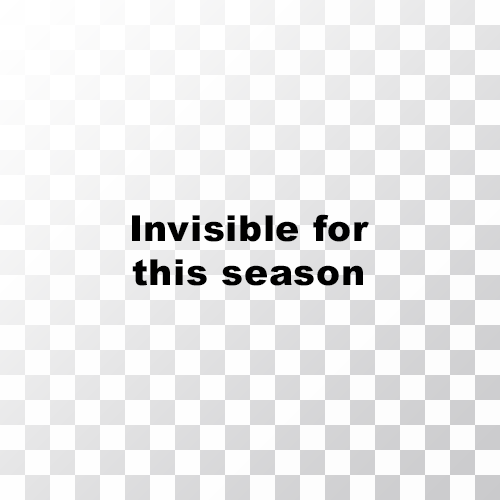
<style>
.page{position:relative;width:500px;height:500px;background:#fefefe}
.page>*{position:absolute;margin:0}
.t1{font:36px "Arial-Black";letter-spacing:0.02em;color:#000000}
</style>
<div class="page">
<p class="t1" style="left:132px;top:214px;width:237px;height:72px;text-align:center">Invisible for<br>this season</p>
</div>
